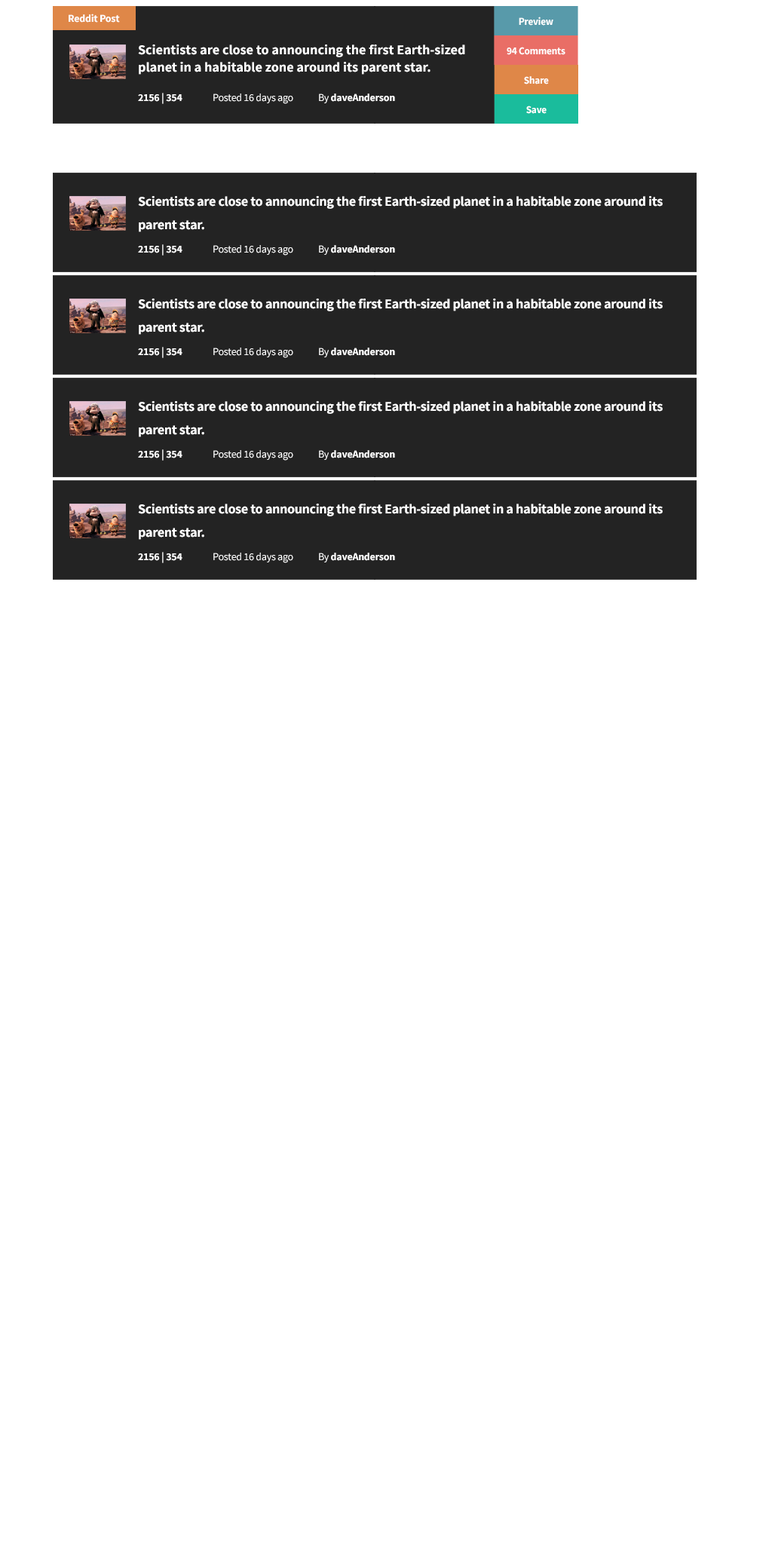
<style>
.page{position:relative;width:772px;height:1544px;background:#ffffff}
.page>*{position:absolute;margin:0}
.t1{font:10.6px "SourceSansPro-Bold";letter-spacing:-0.02em;color:#ffffff}
.t2{font:10.6px "SourceSansPro-Bold";letter-spacing:-0.02em;color:#ffffff;scale:0.95 1}
.t3{font:13.6px/13.6px "SourceSansPro-Bold";color:#ffffff}
.t4{font:10.6px "SourceSansPro-Regular";letter-spacing:-0.02em;color:#ffffff}
.t5{font:13.6px/23.3px "SourceSansPro-Bold";letter-spacing:-0.02em;color:#ffffff}
</style>
<div class="page">
<p class="t1" style="left:69px;top:14px;width:51px;height:9px">Reddit Post</p>
<p class="t2" style="left:519px;top:17px;width:34px;height:9px">Preview</p>
<p class="t3" style="left:138px;top:44px;width:327px;height:31px">Scientists are close to announcing the first Earth-sized <br>planet in a habitable zone around its parent star.</p>
<p class="t2" style="left:507px;top:47px;width:59px;height:8px">94 Comments</p>
<p class="t2" style="left:524px;top:76px;width:25px;height:8px">Share</p>
<p class="t1" style="left:138px;top:93px;width:44px;height:11px">2156 | 354</p>
<p class="t4" style="left:213px;top:94px;width:80px;height:10px">Posted 16 days ago</p>
<p class="t1" style="left:319px;top:94px;width:76px;height:9px"><span class="t4">By </span>daveAnderson</p>
<p class="t2" style="left:526px;top:106px;width:21px;height:8px">Save</p>
<p class="t5" style="left:138px;top:196px;width:525px;height:36px">Scientists are close to announcing the first Earth-sized planet in a habitable zone around its parent star.</p>
<p class="t1" style="left:138px;top:244px;width:44px;height:12px">2156 | 354</p>
<p class="t4" style="left:213px;top:245px;width:80px;height:11px">Posted 16 days ago</p>
<p class="t1" style="left:319px;top:245px;width:76px;height:10px"><span class="t4">By </span>daveAnderson</p>
<p class="t5" style="left:138px;top:299px;width:525px;height:36px">Scientists are close to announcing the first Earth-sized planet in a habitable zone around its parent star.</p>
<p class="t1" style="left:138px;top:347px;width:44px;height:11px">2156 | 354</p>
<p class="t4" style="left:213px;top:348px;width:80px;height:10px">Posted 16 days ago</p>
<p class="t1" style="left:319px;top:348px;width:76px;height:9px"><span class="t4">By </span>daveAnderson</p>
<p class="t5" style="left:138px;top:401px;width:525px;height:36px">Scientists are close to announcing the first Earth-sized planet in a habitable zone around its parent star.</p>
<p class="t1" style="left:138px;top:449px;width:44px;height:12px">2156 | 354</p>
<p class="t4" style="left:213px;top:450px;width:80px;height:11px">Posted 16 days ago</p>
<p class="t1" style="left:319px;top:450px;width:76px;height:10px"><span class="t4">By </span>daveAnderson</p>
<p class="t5" style="left:138px;top:504px;width:525px;height:36px">Scientists are close to announcing the first Earth-sized planet in a habitable zone around its parent star.</p>
<p class="t1" style="left:138px;top:552px;width:44px;height:11px">2156 | 354</p>
<p class="t4" style="left:213px;top:553px;width:80px;height:10px">Posted 16 days ago</p>
<p class="t1" style="left:319px;top:553px;width:76px;height:10px"><span class="t4">By </span>daveAnderson</p>
</div>
